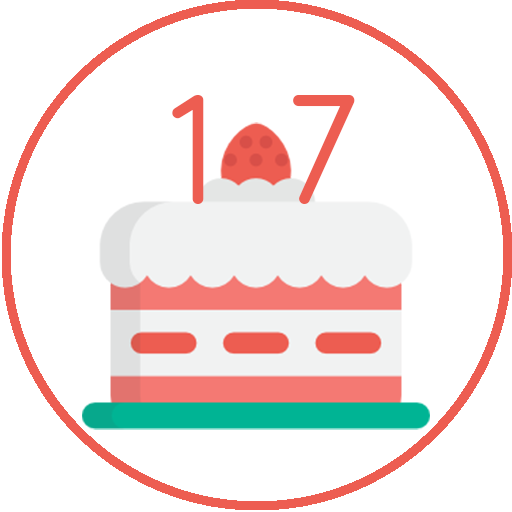
<style>
.page{position:relative;width:512px;height:512px;background:#ffffff}
.page>*{position:absolute;margin:0}
.t1{font:170.7px "Antipasto";color:#ed5d51}
</style>
<div class="page">
<p class="t1" style="left:172px;top:95px;width:183px;height:109px">1   7</p>
</div>
